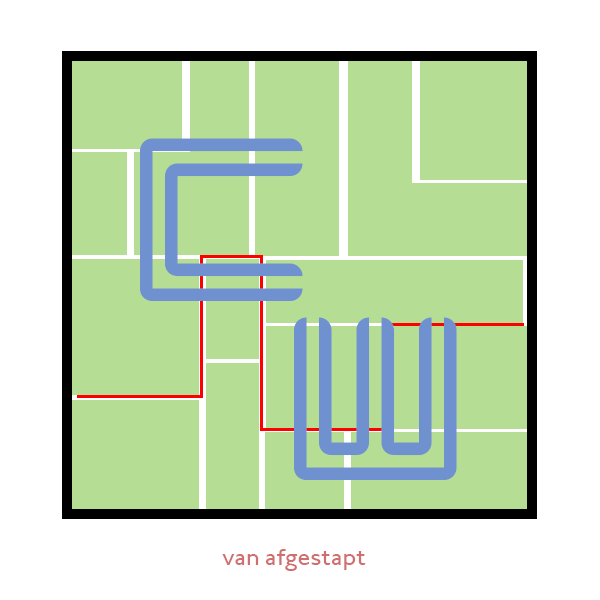
<style>
.page{position:relative;width:600px;height:600px;background:#b5dd94}
.page>*{position:absolute;margin:0}
.t1{font:200px "Liner";letter-spacing:0.01em;color:#6f91d0}
.t2{font:24px "JohnstonMdITCTT";letter-spacing:0.01em;color:#d06f6f}
</style>
<div class="page">
<p class="t1" style="left:140px;top:138px;width:163px;height:163px">C</p>
<p class="t1" style="left:294px;top:317px;width:163px;height:163px">W</p>
<p class="t2" style="left:222px;top:549px;width:144px;height:22px">van afgestapt</p>
</div>
